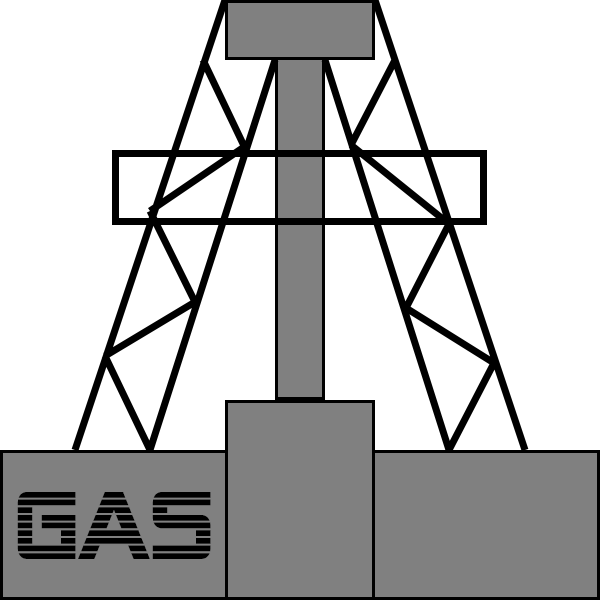
<style>
.page{position:relative;width:600px;height:600px;background:#ffffff}
.page>*{position:absolute;margin:0}
.t1{font:95.8px "AlienEncounters";color:#000000}
</style>
<div class="page">
<p class="t1" style="left:17px;top:492px;width:194px;height:67px">gas</p>
</div>
